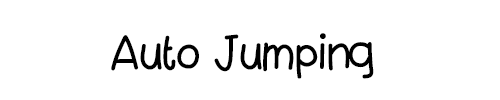
<style>
.page{position:relative;width:500px;height:100px;background:#ffffff}
.page>*{position:absolute;margin:0}
.t1{font:48px "KBPinkLipgloss";color:#000000}
</style>
<div class="page">
<p class="t1" style="left:111px;top:33px;width:263px;height:46px">Auto Jumping</p>
</div>
